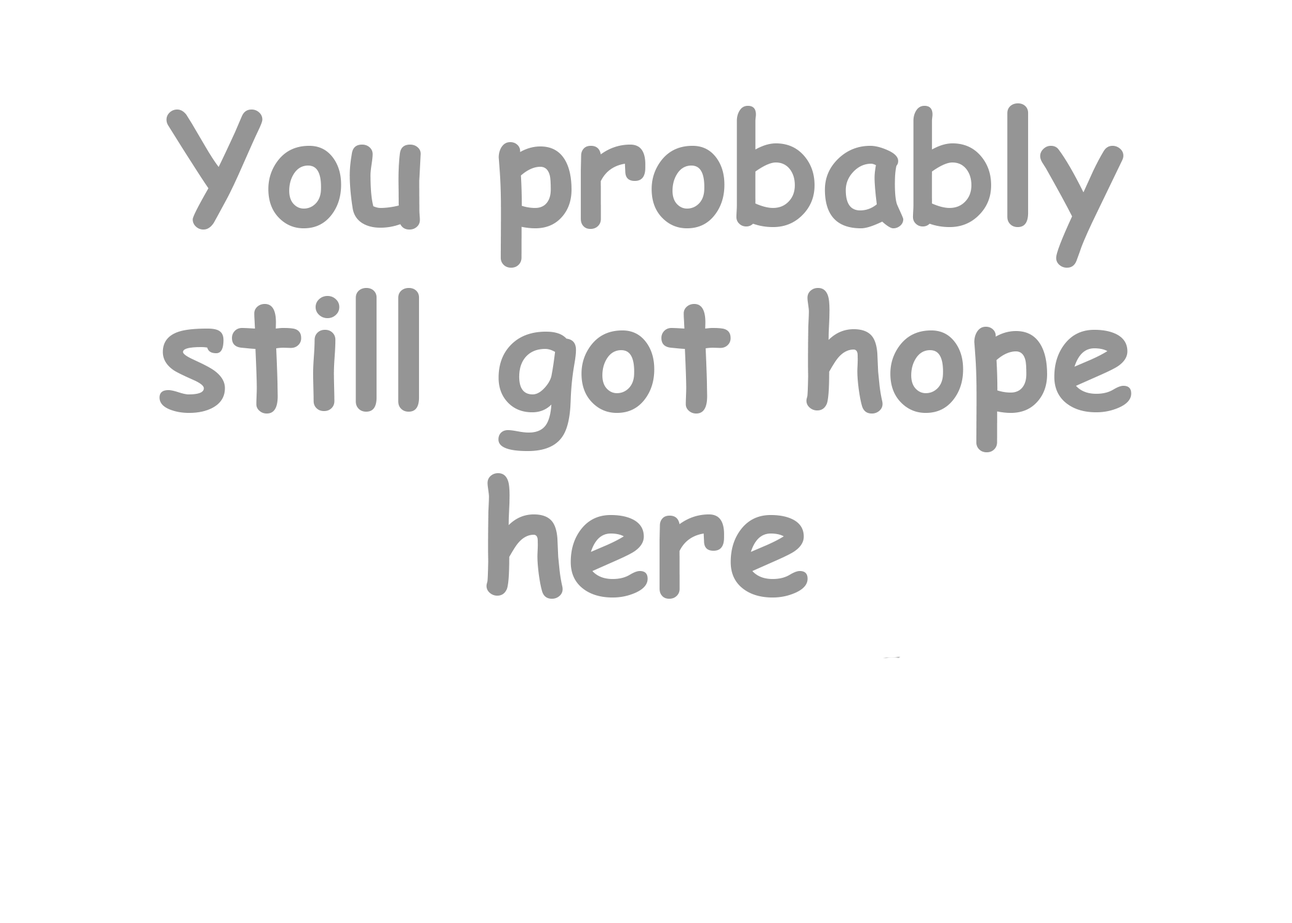
<style>
.page{position:relative;width:1292px;height:923px;background:#ffffff}
.page>*{position:absolute;margin:0}
.t1{font:153.8px "ComicSansMS-Bold";color:#959595}
</style>
<div class="page">
<p class="t1" style="left:159px;top:103px;width:972px;height:496px;text-align:center">You probably still got hope here</p>
</div>
